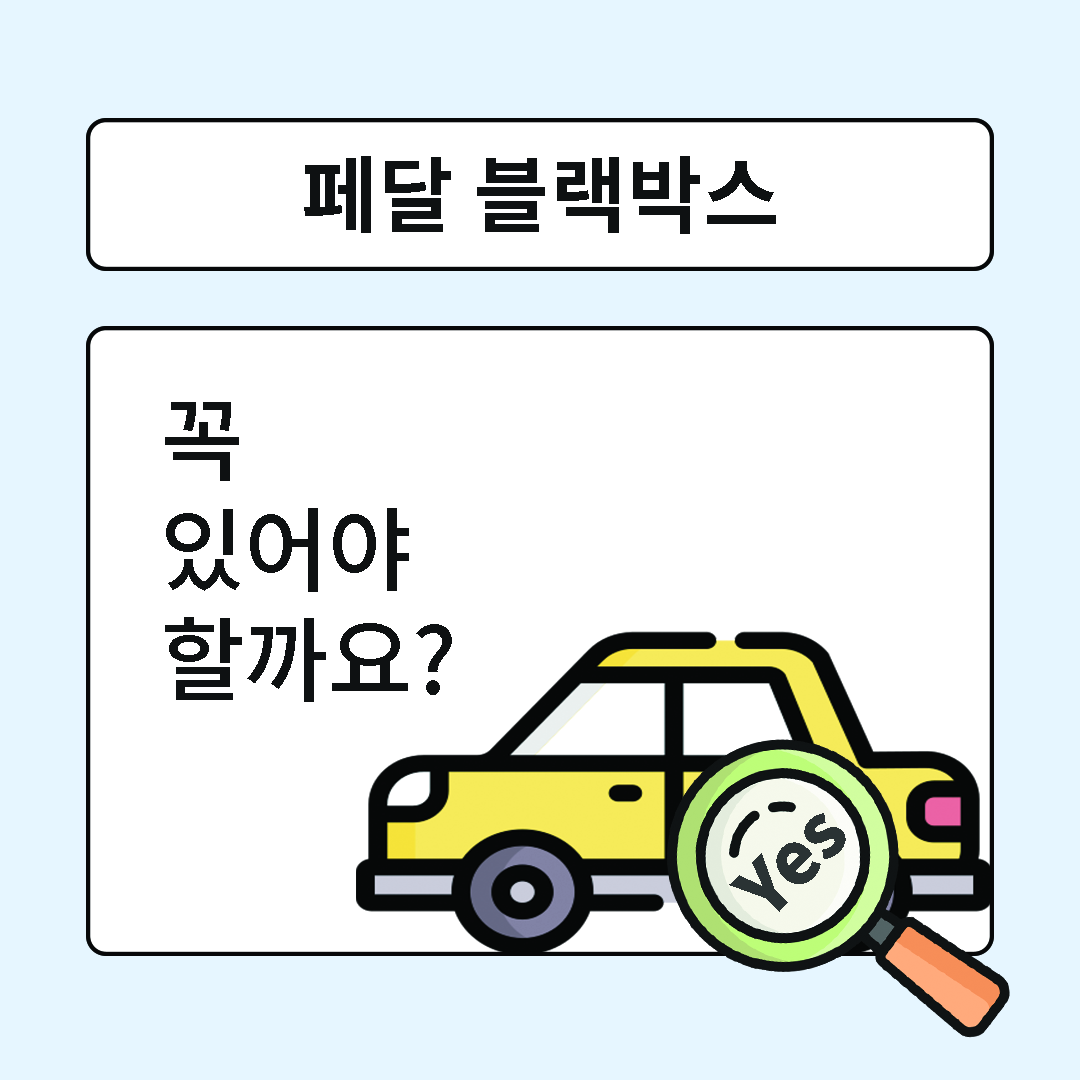
<style>
.page{position:relative;width:1080px;height:1080px;background:#ffffff}
.page>*{position:absolute;margin:0}
.t1{font:83.3px "NotoSansCJKkr-Bold";color:#0e1112}
.t2{font:91.7px "NotoSansCJKkr-Medium";color:#0e1112}
.t3{font:73px "NotoSansCJKkr-Black";color:#2a3334}
</style>
<div class="page">
<p class="t1" style="left:304px;top:156px;width:472px;height:78px">페달 블랙박스</p>
<p class="t2" style="left:165px;top:402px;width:287px;height:300px">꼭 <br>있어야<br>할까요?</p>
<p class="t3" style="left:729px;top:813px;width:117px;height:99px;rotate:-45deg">Yes</p>
</div>
